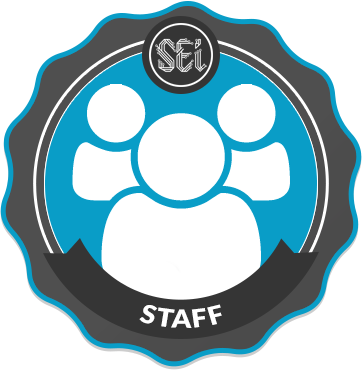
<style>
.page{position:relative;width:362px;height:375px;background:#ffffff}
.page>*{position:absolute;margin:0}
.t1{font:25px "Lato-Black";letter-spacing:0.06em;color:#ffffff;scale:1.11 1}
</style>
<div class="page">
<p class="t1" style="left:139px;top:304px;width:83px;height:24px">STAFF</p>
</div>
